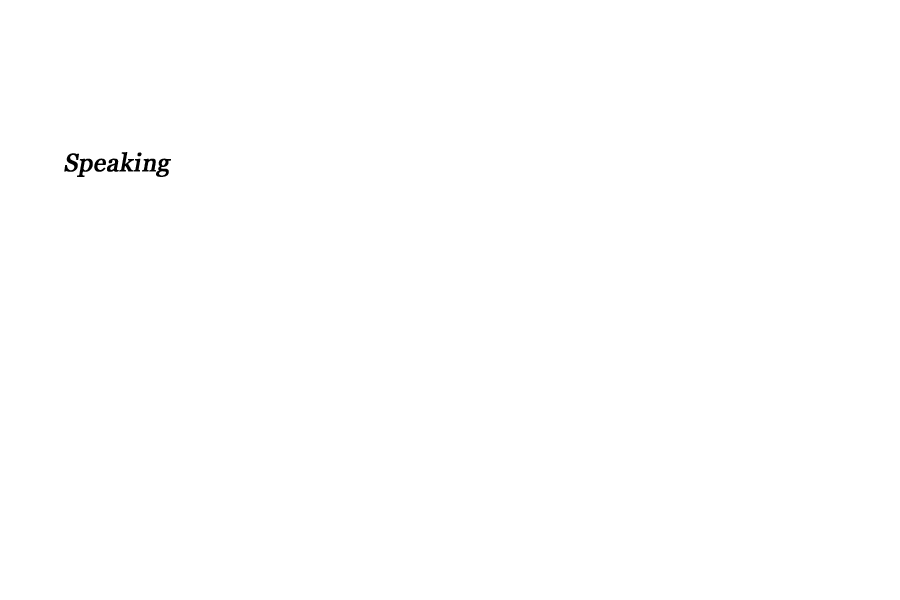
<style>
.page{position:relative;width:900px;height:600px;background:#ffffff}
.page>*{position:absolute;margin:0}
.t1{font:24.9px "Georgia";color:#000000;font-weight:bold;font-style:italic}
</style>
<div class="page">
<p class="t1" style="left:64px;top:152px;width:107px;height:25px">Speaking</p>
</div>
